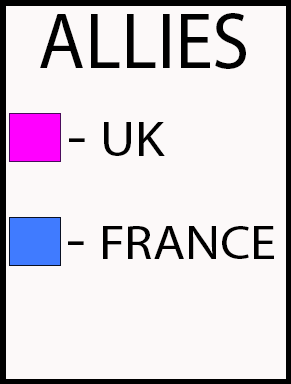
<style>
.page{position:relative;width:291px;height:384px;background:#fcf9f9}
.page>*{position:absolute;margin:0}
.t1{font:80px "MyriadPro-Regular";color:#000000;scale:0.95 1}
.t2{font:49.3px "MyriadPro-Regular";color:#000000;scale:1.1 1}
.t3{font:58.2px "MyriadPro-Regular";color:#000000;scale:1.1 1}
.t4{font:48px "MyriadPro-Regular";color:#000000;scale:1.1 1}
</style>
<div class="page">
<p class="t1" style="left:40px;top:13px;width:206px;height:56px">ALLIES</p>
<p class="t2" style="left:69px;top:122px;width:96px;height:34px"><span class="t3">- </span>UK</p>
<p class="t4" style="left:68px;top:226px;width:206px;height:33px"><span class="t3">- </span>FRANCE</p>
</div>
